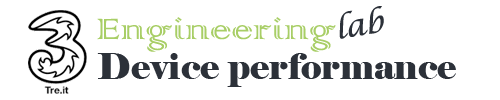
<style>
.page{position:relative;width:500px;height:100px;background:#ffffff}
.page>*{position:absolute;margin:0}
.t1{font:30px "LucidaCalligraphy-Italic";color:#2c3139}
.t2{font:38.5px "ColonnaMT";color:#a8ce66;scale:1.19 1}
.t3{font:36px "Elephant-Regular";color:#2c3139}
</style>
<div class="page">
<p class="t1" style="left:339px;top:6px;width:45px;height:33px;rotate:-9deg">lab</p>
<p class="t2" style="left:97px;top:17px;width:239px;height:35px">Engineering</p>
<p class="t3" style="left:97px;top:53px;width:359px;height:34px">Device performance</p>
</div>
